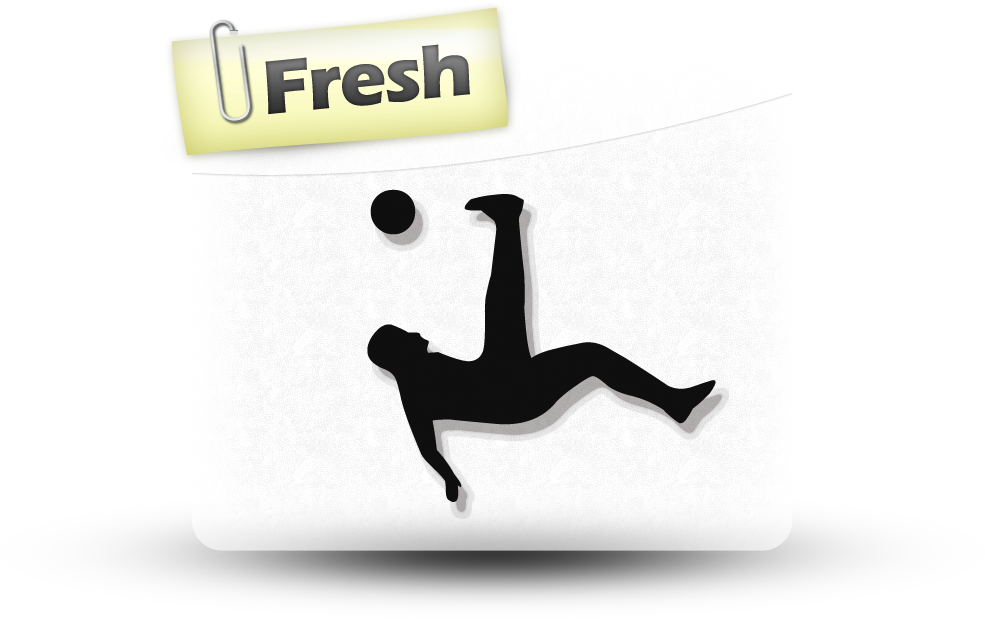
<style>
.page{position:relative;width:985px;height:619px;background:#ffffff}
.page>*{position:absolute;margin:0}
.t1{font:78px "ErasITC-Bold";letter-spacing:-0.05em;color:#4c4c4c;font-weight:bold}
</style>
<div class="page">
<p class="t1" style="left:265px;top:44px;width:205px;height:71px;rotate:-6deg">Fresh</p>
</div>
